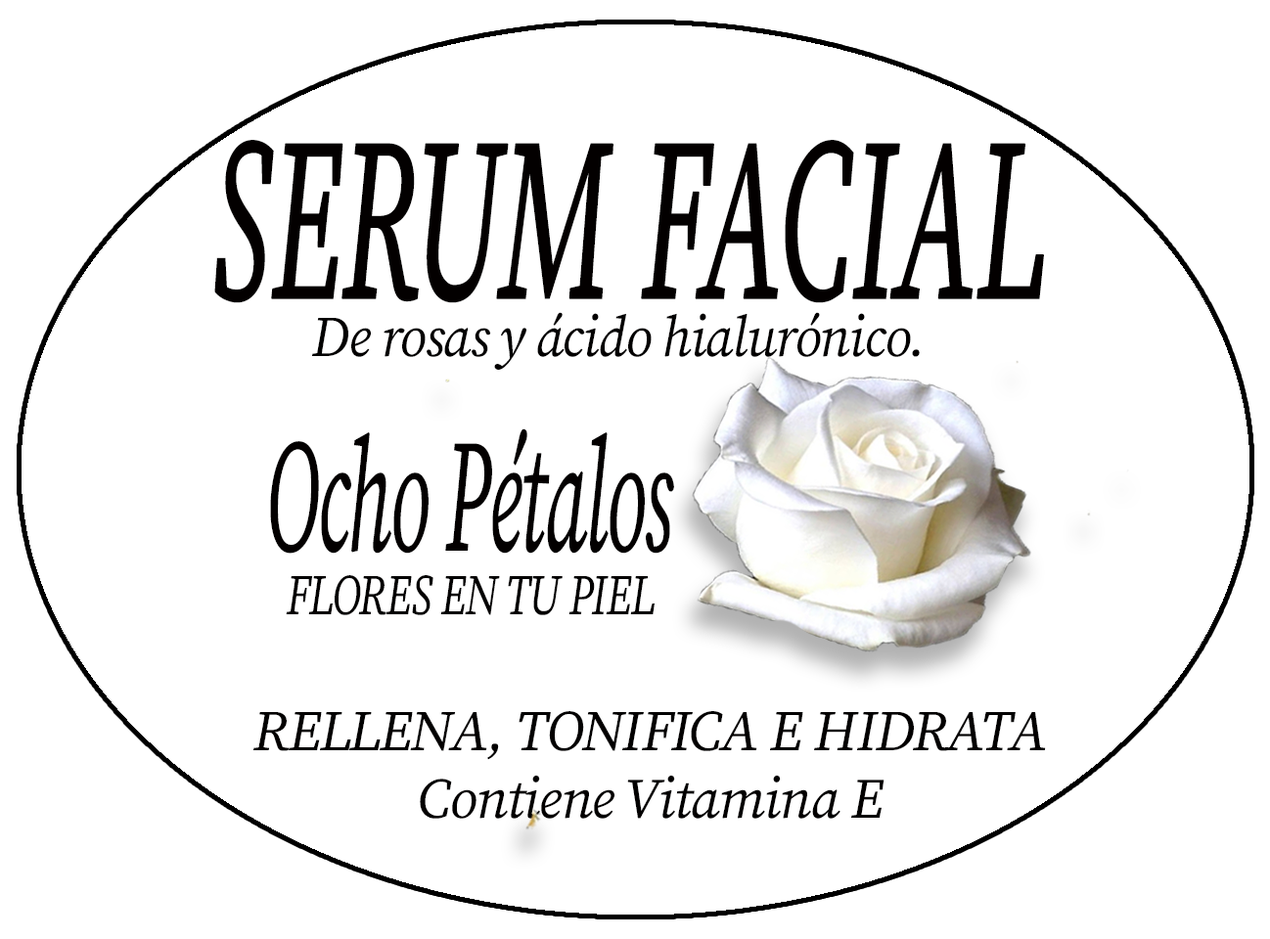
<style>
.page{position:relative;width:1270px;height:939px;background:#ffffff}
.page>*{position:absolute;margin:0}
.t1{font:230.1px "SourceSerifPro-It";letter-spacing:-0.025em;color:#030000;font-weight:bold;scale:0.53 1}
.t2{font:57.1px "SourceSerifPro-It";letter-spacing:-0.025em;color:#020000;scale:0.95 1}
.t3{font:159.8px "SourceSerifPro-It";letter-spacing:-0.025em;color:#030000;scale:0.51 1}
.t4{font:57.1px "SourceSerifPro-It";letter-spacing:-0.025em;color:#020000;scale:0.77 1}
.t5{font:57.1px "SourceSerifPro-It";letter-spacing:-0.025em;color:#020000}
.t6{font:56.7px "SourceSerifPro-It";letter-spacing:-0.025em;color:#020000}
</style>
<div class="page">
<p class="t1" style="left:214px;top:140px;width:830px;height:163px">SERUM FACIAL</p>
<p class="t2" style="left:312px;top:312px;width:608px;height:58px">De rosas y ácido hialurónico.</p>
<p class="t3" style="left:270px;top:428px;width:404px;height:126px">Ocho Pétalos</p>
<p class="t4" style="left:286px;top:575px;width:368px;height:40px">FLORES EN TU PIEL</p>
<p class="t5" style="left:253px;top:711px;width:793px;height:49px">RELLENA, TONIFICA E HIDRATA</p>
<p class="t6" style="left:420px;top:775px;width:464px;height:44px">Contiene Vitamina E</p>
</div>
